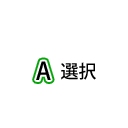
<style>
.page{position:relative;width:128px;height:128px;background:#ffffff}
.page>*{position:absolute;margin:0}
.t1{font:18px "KozGoPr6N-Medium";color:#000000}
</style>
<div class="page">
<p class="t1" style="left:61px;top:62px;width:35px;height:18px">選択</p>
</div>
